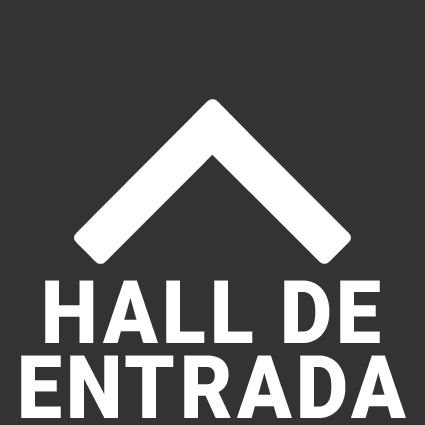
<style>
.page{position:relative;width:425px;height:425px;background:#333333}
.page>*{position:absolute;margin:0}
.t1{font:87.7px/75px "Roboto-Black";letter-spacing:0.05em;color:#ffffff;scale:0.92 1}
</style>
<div class="page">
<p class="t1" style="left:21px;top:280px;width:385px;height:138px;text-align:center">HALL DE<br>ENTRADA</p>
</div>
